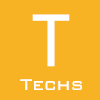
<style>
.page{position:relative;width:100px;height:100px;background:#f8b324}
.page>*{position:absolute;margin:0}
.t1{font:68.2px "MicrosoftYaHei";color:#ffffff}
.t2{font:20.4px "712-CAI978";color:#ffffff}
</style>
<div class="page">
<p class="t1" style="left:32px;top:14px;width:38px;height:53px">T</p>
<p class="t2" style="left:20px;top:79px;width:62px;height:11px">Techs</p>
</div>
